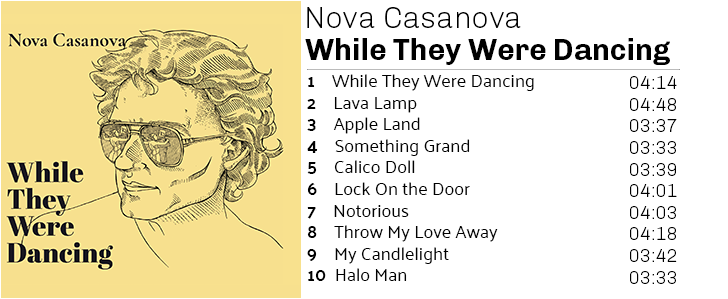
<style>
.page{position:relative;width:728px;height:299px;background:#ffffff}
.page>*{position:absolute;margin:0}
.t1{font:30px "Chivo-Light";color:#000000}
.t2{font:30px "Chivo-Bold";color:#000000}
.t3{font:18px "Palanquin-Regular";color:#000000}
.t4{font:18px "Palanquin-Bold";color:#000000}
.t5{font:18px "Chivo-Light";color:#000000}
</style>
<div class="page">
<p class="t1" style="left:307px;top:7px;width:214px;height:21px">Nova Casanova</p>
<p class="t2" style="left:305px;top:38px;width:365px;height:27px">While They Were Dancing</p>
<p class="t3" style="left:307px;top:74px;width:227px;height:207px"><span class="t4">1</span>    While They Were Dancing<br><span class="t4">2</span>    Lava Lamp<br><span class="t4">3</span>    Apple Land<br><span class="t4">4</span>    Something Grand<br><span class="t4">5</span>    Calico Doll<br><span class="t4">6  </span>  Lock On the Door<br><span class="t4">7</span>    Notorious<br><span class="t4">8</span>    Throw My Love Away<br><span class="t4">9</span>    My Candlelight<br><span class="t4">10</span>  Halo Man</p>
<p class="t5" style="left:630px;top:76px;width:47px;height:208px">04:14<br>04:48<br>03:37<br>03:33<br>03:39<br>04:01<br>04:03<br>04:18<br>03:42<br>03:33</p>
</div>
